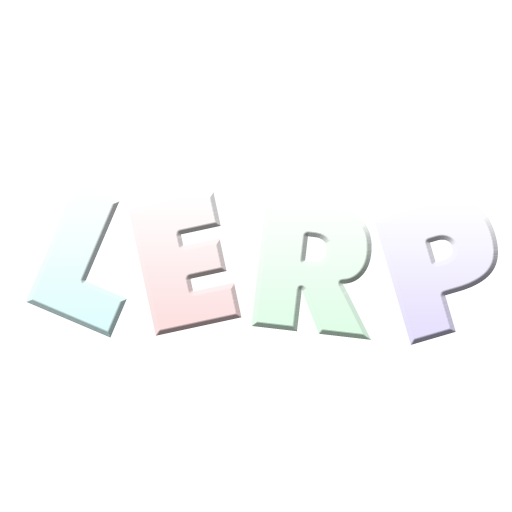
<style>
.page{position:relative;width:512px;height:512px;background:#ffffff}
.page>*{position:absolute;margin:0}
.t1{font:180px "FuturaBT-ExtraBlack";letter-spacing:0.1em;color:#edfefe}
.t2{font:180px "FuturaBT-ExtraBlack";letter-spacing:0.1em;color:#feefef}
.t3{font:180px "FuturaBT-ExtraBlack";letter-spacing:0.1em;color:#effef3}
.t4{font:180px "FuturaBT-ExtraBlack";letter-spacing:0.1em;color:#f5f2ff}
</style>
<div class="page">
<p class="t1" style="left:26px;top:183px;width:101px;height:155px;rotate:23deg">L</p>
<p class="t2" style="left:128px;top:191px;width:114px;height:145px;rotate:-12deg">E</p>
<p class="t3" style="left:251px;top:197px;width:121px;height:143px;rotate:7deg">R</p>
<p class="t4" style="left:374px;top:201px;width:124px;height:144px;rotate:-16deg">P</p>
</div>
